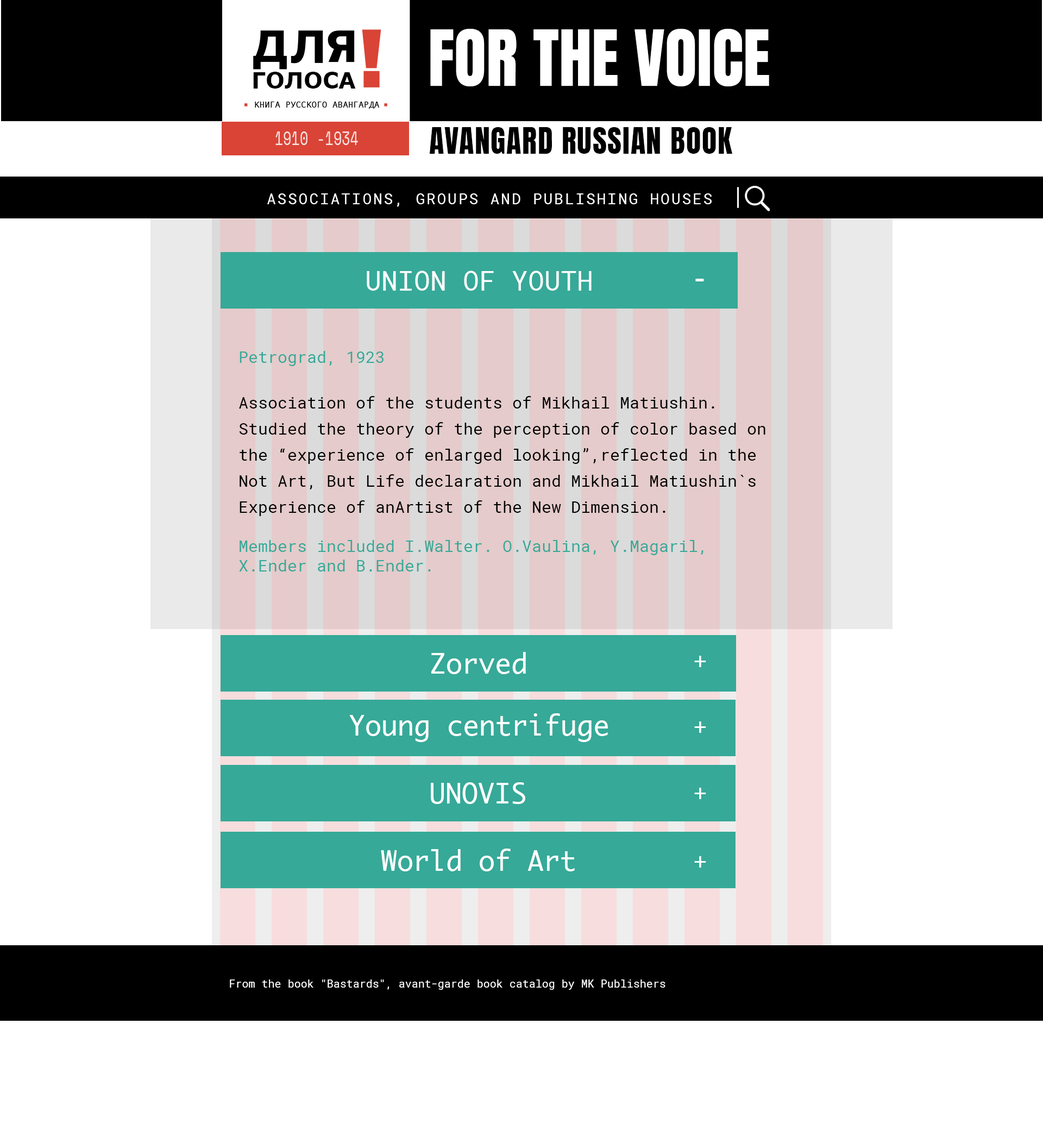
<style>
.page{position:relative;width:1043px;height:1143px;background:#ffffff}
.page>*{position:absolute;margin:0}
.t1{font:65.7px "Anton-Regular";color:#ffffff}
.t2{font:22.3px "Verdana-Bold";color:#000000}
.t3{font:19px "SpaceMono-Regular";color:#f8e2e1;scale:0.72 1}
.t4{font:30.6px "Anton-Regular";letter-spacing:0.03em;color:#000000}
.t5{font:15.2px "RobotoMono-Regular";letter-spacing:0.1em;color:#ffffff}
.t6{font:27.2px "RobotoMono-Regular";color:#ffffff}
.t7{font:32.6px "Helvetica";color:#ffffff}
.t8{font:16.3px/26.1px "RobotoMono-Regular";color:#000000}
.t9{font:16.3px "RobotoMono-Regular";color:#36a998}
.t10{font:27.2px "Monaco";color:#ffffff}
.t11{font:21.7px "Helvetica";color:#ffffff}
.t12{font:10.9px "RobotoMono-Regular";color:#ffffff}
</style>
<div class="page">
<p class="t1" style="left:430px;top:29px;width:339px;height:57px">FOR THE VOICE</p>
<p class="t2" style="left:253px;top:72px;width:103px;height:17px">ГОЛОСА</p>
<p class="t3" style="left:275px;top:131px;width:83px;height:14px">1910 -1934</p>
<p class="t4" style="left:429px;top:127px;width:304px;height:27px">AVANGARD RUSSIAN BOOK</p>
<p class="t5" style="left:267px;top:193px;width:445px;height:14px">ASSOCIATIONS, GROUPS AND PUBLISHING HOUSES</p>
<p class="t6" style="left:367px;top:271px;width:225px;height:20px">UNION OF YOUTH</p>
<p class="t7" style="left:695px;top:279px;width:9px;height:2px">-</p>
<p class="t8" style="left:239px;top:351px;width:527px;height:221px"><span class="t9">Petrograd, 1923<br><br></span>Association of the students of Mikhail Matiushin.  Studied the theory of the perception of color based on the “experience of enlarged looking”,reflected in the  Not Art, But Life declaration and Mikhail Matiushin`s Experience of anArtist of the New Dimension.<br><br><span class="t9">Members included I.Walter. O.Vaulina, Y.Magaril,      X.Ender and B.Ender.</span></p>
<p class="t10" style="left:431px;top:652px;width:95px;height:22px">Zorved</p>
<p class="t11" style="left:694px;top:656px;width:12px;height:11px">+</p>
<p class="t10" style="left:349px;top:713px;width:259px;height:29px">Young centrifuge</p>
<p class="t11" style="left:694px;top:722px;width:12px;height:11px">+</p>
<p class="t10" style="left:431px;top:782px;width:94px;height:22px">UNOVIS</p>
<p class="t11" style="left:694px;top:788px;width:12px;height:11px">+</p>
<p class="t10" style="left:381px;top:849px;width:194px;height:22px">World of Art</p>
<p class="t11" style="left:694px;top:856px;width:12px;height:12px">+</p>
<p class="t12" style="left:230px;top:980px;width:436px;height:10px">From the book "Bastards", avant-garde book catalog by MK Publishers</p>
</div>
